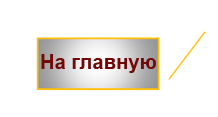
<style>
.page{position:relative;width:218px;height:117px;background:#ffffff}
.page>*{position:absolute;margin:0}
.t1{font:20.3px "Arial-BoldMT";color:#720909}
</style>
<div class="page">
<p class="t1" style="left:41px;top:54px;width:115px;height:19px">На главную</p>
</div>
